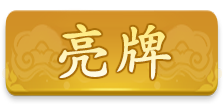
<style>
.page{position:relative;width:223px;height:104px}
.page>*{position:absolute;margin:0}
.t1{font:60px "AaBoruokaishuBldjf";letter-spacing:0.02em}
</style>
<div class="page">
<p class="t1" style="left:59px;top:24px;width:112px;height:56px">亮牌</p>
</div>
